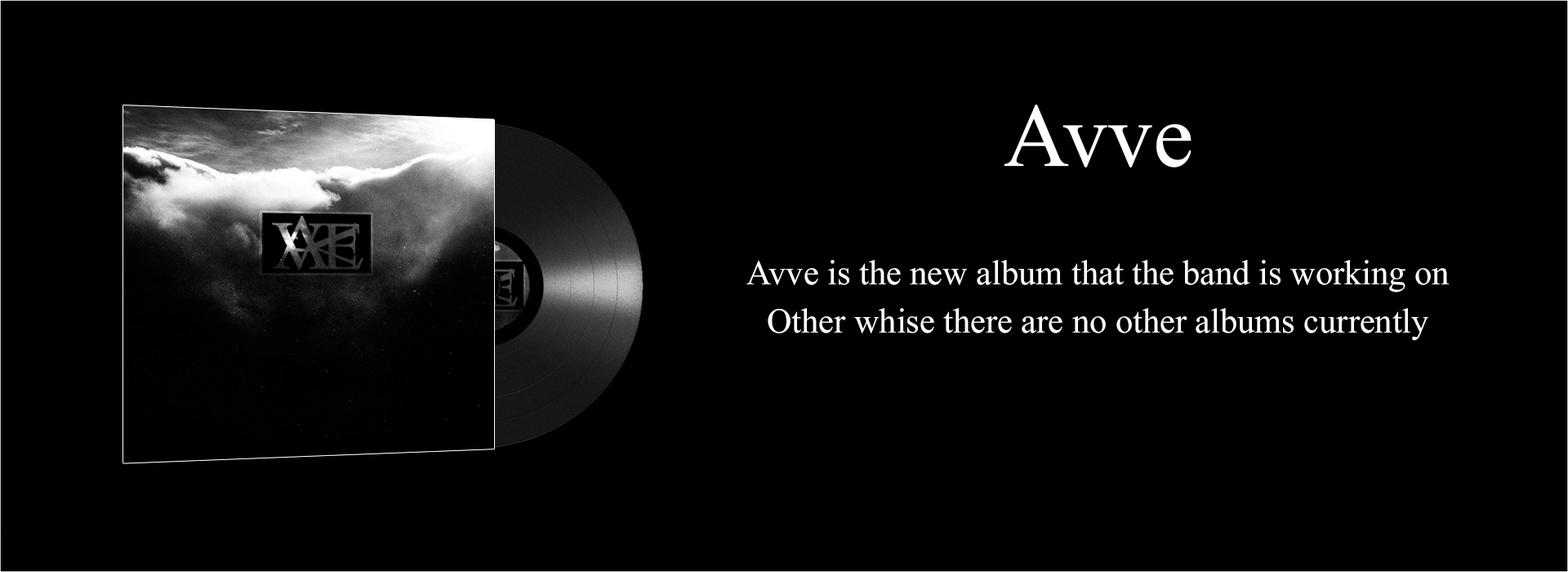
<style>
.page{position:relative;width:1568px;height:572px;background:#000000}
.page>*{position:absolute;margin:0}
.t1{font:135.1px "Microsoft-Himalaya";color:#ffffff}
.t2{font:52px "Microsoft-Himalaya";color:#ffffff}
</style>
<div class="page">
<p class="t1" style="left:1004px;top:105px;width:188px;height:62px">Avve</p>
<p class="t2" style="left:746px;top:260px;width:704px;height:32px">Avve is the new album that the band is working on</p>
<p class="t2" style="left:768px;top:308px;width:660px;height:33px">Other whise there are no other albums currently</p>
</div>
